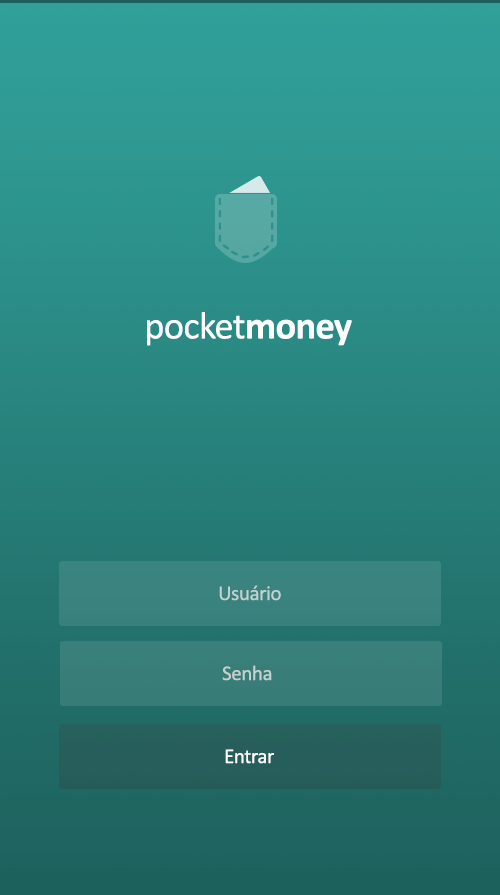
<style>
.page{position:relative;width:500px;height:895px}
.page>*{position:absolute;margin:0}
.t1{font:38.6px "Calibri";letter-spacing:-0.02em;color:#ffffff}
.t2{font:38.6px "Calibri-Bold";letter-spacing:-0.02em;color:#ffffff}
.t3{font:21px "Calibri";letter-spacing:-0.02em;color:#c0d3d2}
.t4{font:21px "Calibri";letter-spacing:-0.02em;color:#c3d2d1}
.t5{font:21px "Calibri";letter-spacing:-0.02em;color:#ffffff}
</style>
<div class="page">
<p class="t1" style="left:147px;top:312px;width:205px;height:34px">pocket<span class="t2">money</span></p>
<p class="t3" style="left:219px;top:585px;width:62px;height:16px">Usuário</p>
<p class="t4" style="left:222px;top:665px;width:50px;height:16px">Senha</p>
<p class="t5" style="left:225px;top:749px;width:49px;height:15px">Entrar</p>
</div>
